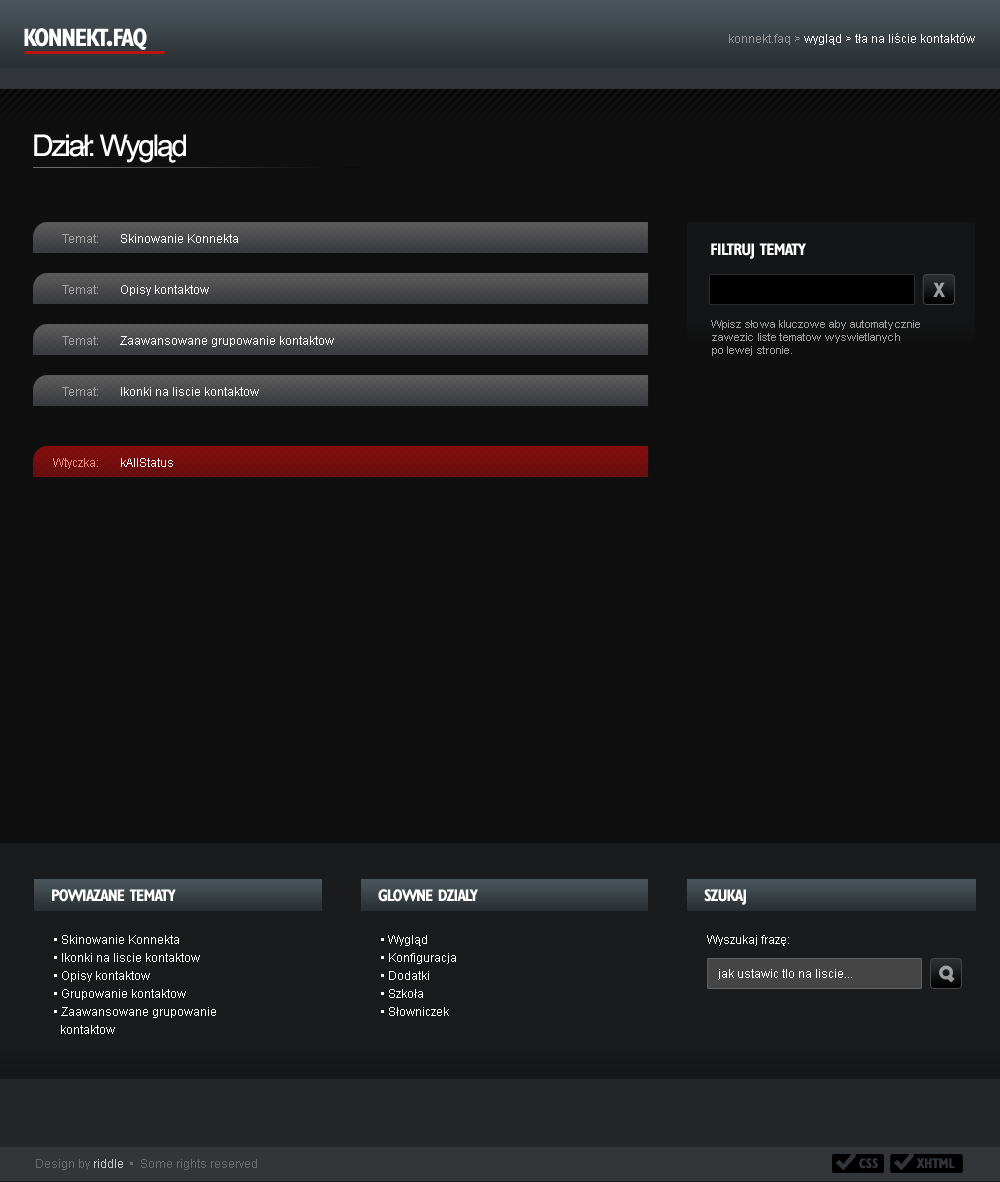
<style>
.page{position:relative;width:1000px;height:1182px;background:#0f0f0f}
.page>*{position:absolute;margin:0}
.t1{font:36px "Humanist521BT-BoldCondensed";letter-spacing:-0.035em;color:#ffffff;font-variant:small-caps}
.t2{font:12px "ArialMT";color:#ffffff}
.t3{font:12px "ArialMT";color:#979797}
.t4{font:30px "ArialMT";letter-spacing:-0.075em;color:#ffffff}
.t5{font:12px "ArialMT";color:#a4a4a4}
.t6{font:24px "Humanist521BT-BoldCondensed";letter-spacing:-0.035em;color:#ffffff;font-variant:small-caps}
.t7{font:30px "Humanist521BT-BoldCondensed";letter-spacing:-0.035em;color:#9d9d9e;font-variant:small-caps}
.t8{font:11px "ArialMT";color:#a0a0a0}
.t9{font:12px "ArialMT";color:#f28787}
.t10{font:12px/18px "ArialMT";color:#ffffff}
.t11{font:14px "Humanist521BT-BoldCondensed";color:#333639}
.t12{font:12px "ArialMT";color:#6c6c6c}
.t13{font:12px "ArialMT";color:#c8c8c8}
</style>
<div class="page">
<p class="t1" style="left:24px;top:28px;width:85px;height:19px">konnekt</p>
<p class="t1" style="left:106px;top:28px;width:41px;height:22px">.faq</p>
<p class="t2" style="left:729px;top:33px;width:246px;height:12px"><span class="t3">konnekt.faq &gt;</span> wygląd &gt; tła na liście kontaktów</p>
<p class="t4" style="left:34px;top:134px;width:152px;height:29px">Dział: Wygląd</p>
<p class="t2" style="left:62px;top:234px;width:176px;height:9px"><span class="t5">Temat:       </span>Skinowanie Konnekta</p>
<p class="t6" style="left:711px;top:243px;width:95px;height:16px">filtruj tematy</p>
<p class="t2" style="left:62px;top:285px;width:147px;height:11px"><span class="t5">Temat:       </span>Opisy kontaktow</p>
<p class="t7" style="left:933px;top:282px;width:12px;height:15px">x</p>
<p class="t8" style="left:711px;top:320px;width:209px;height:36px">Wpisz słowa kluczowe aby automatycznie<br>zawezic liste tematow wyswietlanych <br>po lewej stronie.</p>
<p class="t2" style="left:62px;top:336px;width:272px;height:11px"><span class="t5">Temat:       </span>Zaawansowane grupowanie kontaktow</p>
<p class="t2" style="left:62px;top:387px;width:197px;height:9px"><span class="t5">Temat:       </span>Ikonki na liscie kontaktow</p>
<p class="t2" style="left:53px;top:458px;width:120px;height:11px"><span class="t9">   Wtyczka:       </span>kAllStatus</p>
<p class="t6" style="left:52px;top:889px;width:124px;height:13px">powiazane tematy</p>
<p class="t6" style="left:378px;top:889px;width:100px;height:13px">glowne dzialy</p>
<p class="t6" style="left:704px;top:889px;width:42px;height:16px">szukaj</p>
<p class="t10" style="left:54px;top:935px;width:162px;height:99px">• Skinowanie Konnekta<br>• Ikonki na liscie kontaktow<br>• Opisy kontaktow<br>• Grupowanie kontaktow<br>• Zaawansowane grupowanie <br>  kontaktow</p>
<p class="t10" style="left:381px;top:935px;width:75px;height:81px">• Wygląd<br>• Konfiguracja<br>• Dodatki<br>• Szkoła<br>• Słowniczek</p>
<p class="t2" style="left:707px;top:935px;width:82px;height:11px">Wyszukaj frazę:</p>
<p class="t2" style="left:718px;top:969px;width:134px;height:11px">jak ustawic tlo na liscie...</p>
<p class="t11" style="left:859px;top:1158px;width:19px;height:11px">CSS</p>
<p class="t11" style="left:916px;top:1158px;width:39px;height:10px">XHTML</p>
<p class="t12" style="left:36px;top:1159px;width:221px;height:11px">Design by <span class="t13">riddle</span>  •  Some rights reserved</p>
</div>
